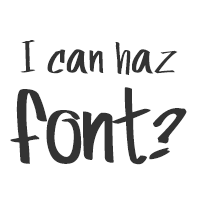
<style>
.page{position:relative;width:200px;height:200px;background:#ffffff}
.page>*{position:absolute;margin:0}
.t1{font:48px/90px "rolina";color:#333333}
.t2{font:108px/90px "rolina";color:#333333}
</style>
<div class="page">
<p class="t1" style="left:10px;top:40px;width:177px;height:125px;text-align:center">I can haz<br><span class="t2">font?</span></p>
</div>
